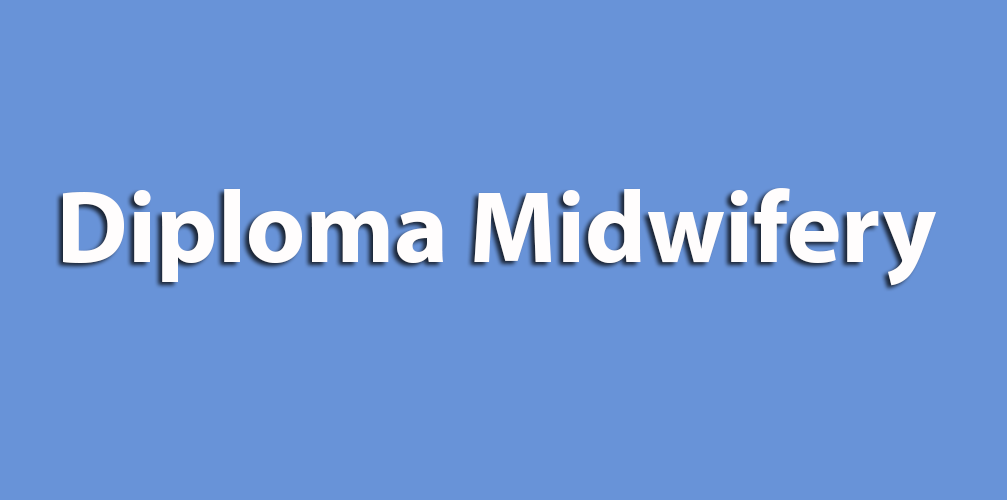
<style>
.page{position:relative;width:1007px;height:500px;background:#6893d8}
.page>*{position:absolute;margin:0}
.t1{font:103px "MyriadPro-Bold";color:#fffdfd}
</style>
<div class="page">
<p class="t1" style="left:63px;top:188px;width:873px;height:98px">Diploma Midwifery</p>
</div>
